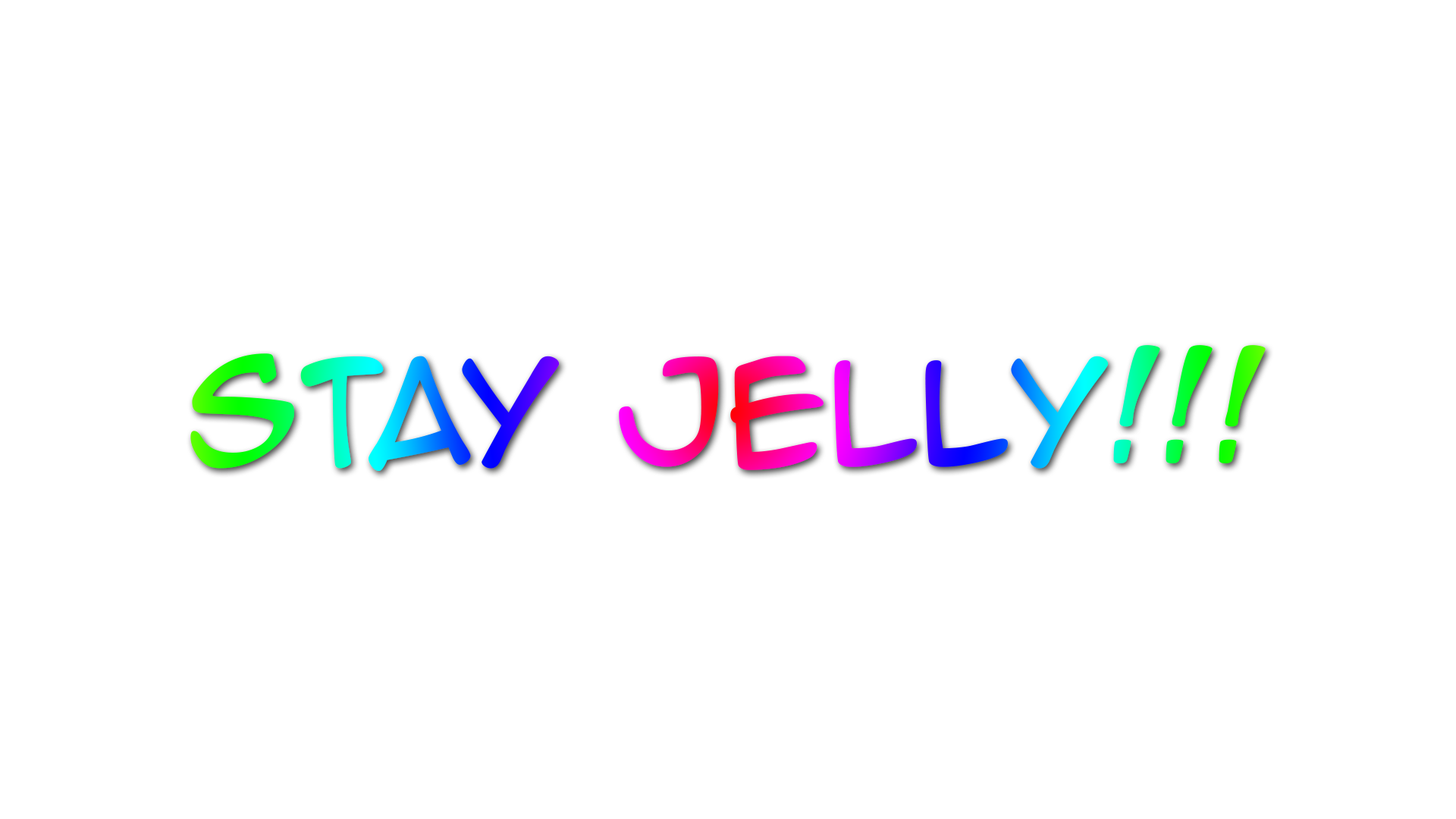
<style>
.page{position:relative;width:1456px;height:819px;background:#ffffff}
.page>*{position:absolute;margin:0}
.t1{font:132.7px "AnimeAce2.0BB"}
</style>
<div class="page">
<p class="t1" style="left:190px;top:345px;width:1076px;height:126px">Stay Jelly!!!</p>
</div>
